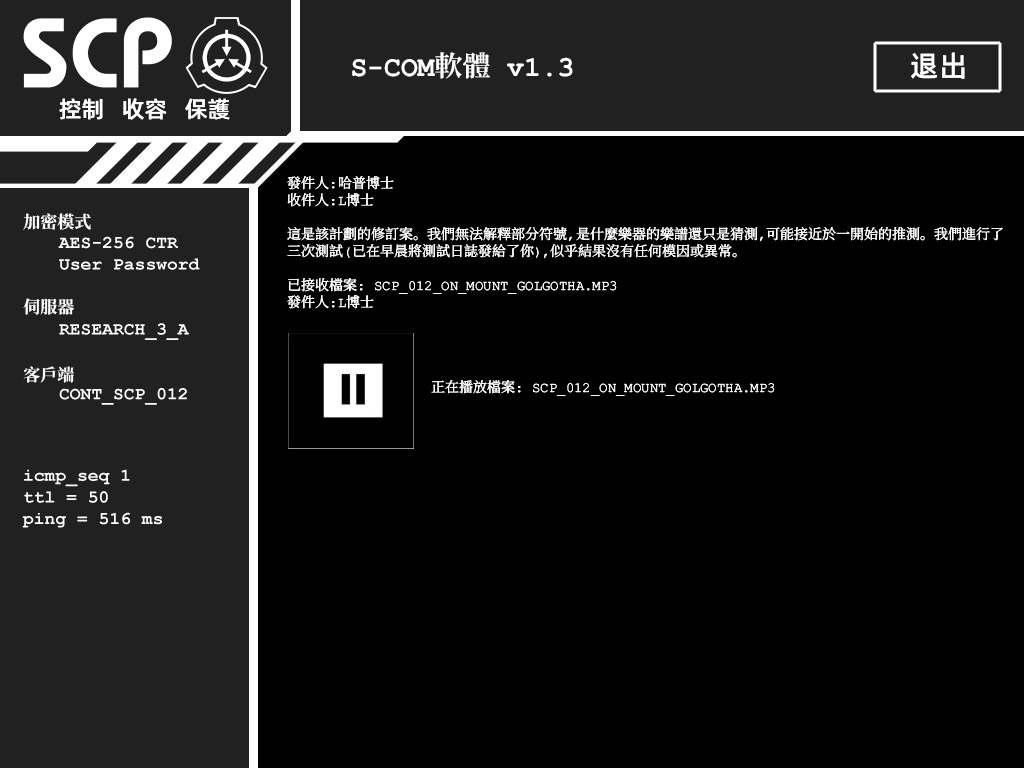
<style>
.page{position:relative;width:1024px;height:768px;background:#000000}
.page>*{position:absolute;margin:0}
.t1{font:28px "ContainmentBreach-Bold";color:#ffffff}
.t2{font:29px "AlibabaPuHuiTiM";color:#ffffff}
.t3{font:23px "AlibabaPuHuiTiM";color:#ffffff}
.t4{font:14px/17px "ContainmentBreach-Regular";color:#ffffff}
.t5{font:17px/17px "ContainmentBreach-Bold";color:#ffffff}
</style>
<div class="page">
<p class="t1" style="left:352px;top:52px;width:221px;height:27px">S-COM軟體 v1.3</p>
<p class="t2" style="left:911px;top:52px;width:54px;height:27px">退出</p>
<p class="t3" style="left:59px;top:98px;width:171px;height:22px">控制   收容   保護</p>
<p class="t4" style="left:287px;top:176px;width:716px;height:220px">發件人：哈普博士<br>收件人：L博士<br><br>這是該計劃的修訂案。我們無法解釋部分符號，是什麼樂器的樂譜還只是猜測，可能接近於一開始的推測。我們進行了<br>三次測試（已在早晨將測試日誌發給了你），似乎結果沒有任何模因或異常。<br><br>已接收檔案： SCP_012_ON_MOUNT_GOLGOTHA.MP3<br>發件人：L博士<br><br><br><br>    <br>    正在播放檔案： SCP_012_ON_MOUNT_GOLGOTHA.MP3</p>
<p class="t5" style="left:23px;top:213px;width:68px;height:170px">加密模式<br><br><br><br><br>伺服器<br><br><br><br>客戶端</p>
</div>
